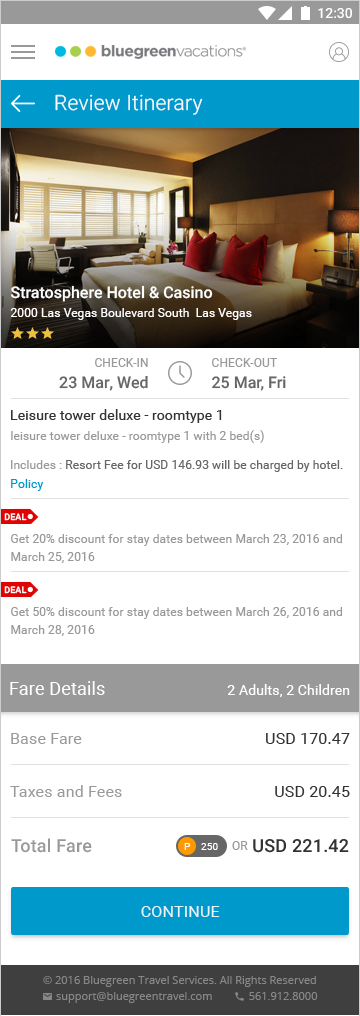
<style>
.page{position:relative;width:360px;height:1016px;background:#ffffff}
.page>*{position:absolute;margin:0}
.t1{font:21px "Roboto-Light";letter-spacing:0.01em;color:#ffffff}
.t2{font:16px "Roboto-Medium";color:#ffffff}
.t3{font:12px "Roboto-Regular";letter-spacing:0.01em;color:#ffffff}
.t4{font:12px "Roboto-Regular";letter-spacing:0.01em;color:#999999}
.t5{font:16px "Roboto-Medium";color:#666666}
.t6{font:14px "Roboto-Regular";letter-spacing:0.01em;color:#333333}
.t7{font:12px "Roboto-Regular";letter-spacing:0.01em;color:#666666}
.t8{font:12px "Roboto-Regular";letter-spacing:0.01em;color:#0099cc}
.t9{font:9px "Roboto-Medium";letter-spacing:0.01em;color:#ffffff}
.t10{font:12px/18px "Roboto-Regular";letter-spacing:0.01em;color:#999999}
.t11{font:18px "Roboto-Regular";letter-spacing:0.01em;color:#ffffff}
.t12{font:14px "Roboto-Regular";letter-spacing:0.01em;color:#ffffff}
.t13{font:16px "Roboto-Regular";letter-spacing:0.01em;color:#999999}
.t14{font:16px "Roboto-Regular";letter-spacing:0.01em;color:#333333}
.t15{font:18px "Roboto-Medium";letter-spacing:0.01em;color:#999999}
.t16{font:10px "Roboto-Regular";letter-spacing:0.01em;color:#ffffff}
.t17{font:18px "Roboto-Medium";letter-spacing:0.01em;color:#333333}
.t18{font:16px "Roboto-Regular";letter-spacing:0.01em;color:#ffffff;text-transform:uppercase}
</style>
<div class="page">
<p class="t1" style="left:55px;top:94px;width:148px;height:21px">Review Itinerary</p>
<p class="t2" style="left:11px;top:285px;width:202px;height:17px">Stratosphere Hotel &amp; Casino</p>
<p class="t3" style="left:10px;top:308px;width:242px;height:12px">2000 Las Vegas Boulevard South  Las Vegas</p>
<p class="t4" style="left:95px;top:358px;width:53px;height:9px">CHECK-IN</p>
<p class="t4" style="left:212px;top:358px;width:65px;height:9px">CHECK-OUT</p>
<p class="t5" style="left:59px;top:375px;width:89px;height:16px">23 Mar, Wed</p>
<p class="t5" style="left:212px;top:376px;width:74px;height:15px">25 Mar, Fri</p>
<p class="t6" style="left:11px;top:409px;width:211px;height:14px">Leisure tower deluxe - roomtype 1</p>
<p class="t4" style="left:11px;top:430px;width:253px;height:13px">leisure tower deluxe - roomtype 1 with 2 bed(s)</p>
<p class="t7" style="left:11px;top:460px;width:332px;height:12px"><span class="t4">Includes : </span>Resort Fee for USD 146.93 will be charged by hotel.</p>
<p class="t8" style="left:11px;top:479px;width:33px;height:12px">Policy</p>
<p class="t9" style="left:4px;top:513px;width:23px;height:8px">DEAL</p>
<p class="t10" style="left:11px;top:534px;width:331px;height:29px">Get 20% discount for stay dates between March 23, 2016 and March 25, 2016</p>
<p class="t9" style="left:4px;top:586px;width:23px;height:8px">DEAL</p>
<p class="t10" style="left:11px;top:607px;width:331px;height:29px">Get 50% discount for stay dates between March 26, 2016 and March 28, 2016</p>
<p class="t11" style="left:10px;top:681px;width:95px;height:14px">Fare Details</p>
<p class="t12" style="left:227px;top:684px;width:123px;height:13px">2 Adults, 2 Children</p>
<p class="t13" style="left:11px;top:733px;width:71px;height:11px">Base Fare</p>
<p class="t14" style="left:266px;top:733px;width:84px;height:11px">USD 170.47</p>
<p class="t13" style="left:10px;top:785px;width:112px;height:12px">Taxes and Fees</p>
<p class="t14" style="left:275px;top:786px;width:75px;height:11px">USD 20.45</p>
<p class="t15" style="left:11px;top:838px;width:81px;height:15px">Total Fare</p>
<p class="t16" style="left:184px;top:843px;width:7px;height:7px">P</p>
<p class="t16" style="left:201px;top:843px;width:17px;height:7px">250</p>
<p class="t4" style="left:232px;top:841px;width:16px;height:9px">OR</p>
<p class="t17" style="left:253px;top:839px;width:96px;height:14px">USD 221.42</p>
<p class="t18" style="left:141px;top:906px;width:79px;height:11px;opacity:0.87">continue</p>
</div>
